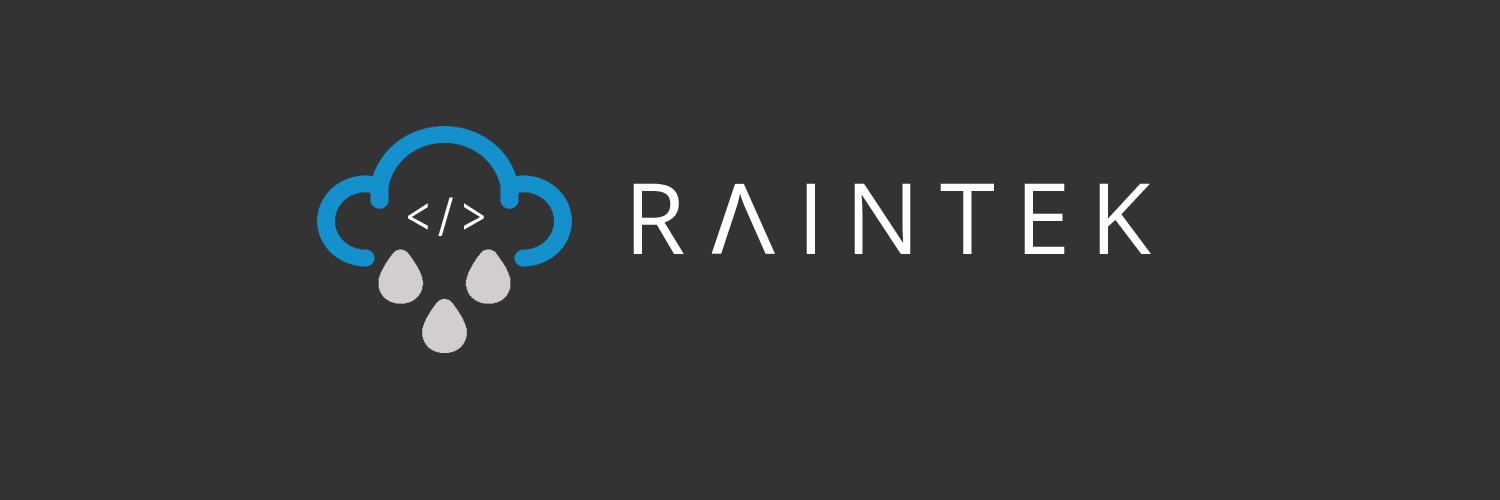
<style>
.page{position:relative;width:1500px;height:500px;background:#333333}
.page>*{position:absolute;margin:0}
.t1{font:98.4px "OpenSans";letter-spacing:0.2em;color:#ffffff}
.t2{font:98px "OpenSans";letter-spacing:0.08em;color:#ffffff;scale:1.08 1}
.t3{font:54.1px "OpenSans";letter-spacing:0.2em;color:#ffffff;scale:0.77 1}
</style>
<div class="page">
<p class="t1" style="left:633px;top:183px;width:518px;height:71px">R  INTEK</p>
<p class="t2" style="left:711px;top:183px;width:64px;height:71px;rotate:-180deg">V</p>
<p class="t3" style="left:408px;top:197px;width:76px;height:39px">&lt;/&gt;</p>
</div>
